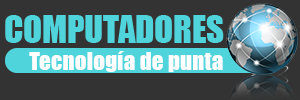
<style>
.page{position:relative;width:300px;height:100px;background:#333333}
.page>*{position:absolute;margin:0}
.t1{font:34.6px "Impact";color:#50d4dc}
.t2{font:23.4px "Impact";color:#ffffff}
</style>
<div class="page">
<p class="t1" style="left:5px;top:15px;width:219px;height:28px">COMPUTADORES</p>
<p class="t2" style="left:29px;top:51px;width:194px;height:21px">Tecnología de punta</p>
</div>
